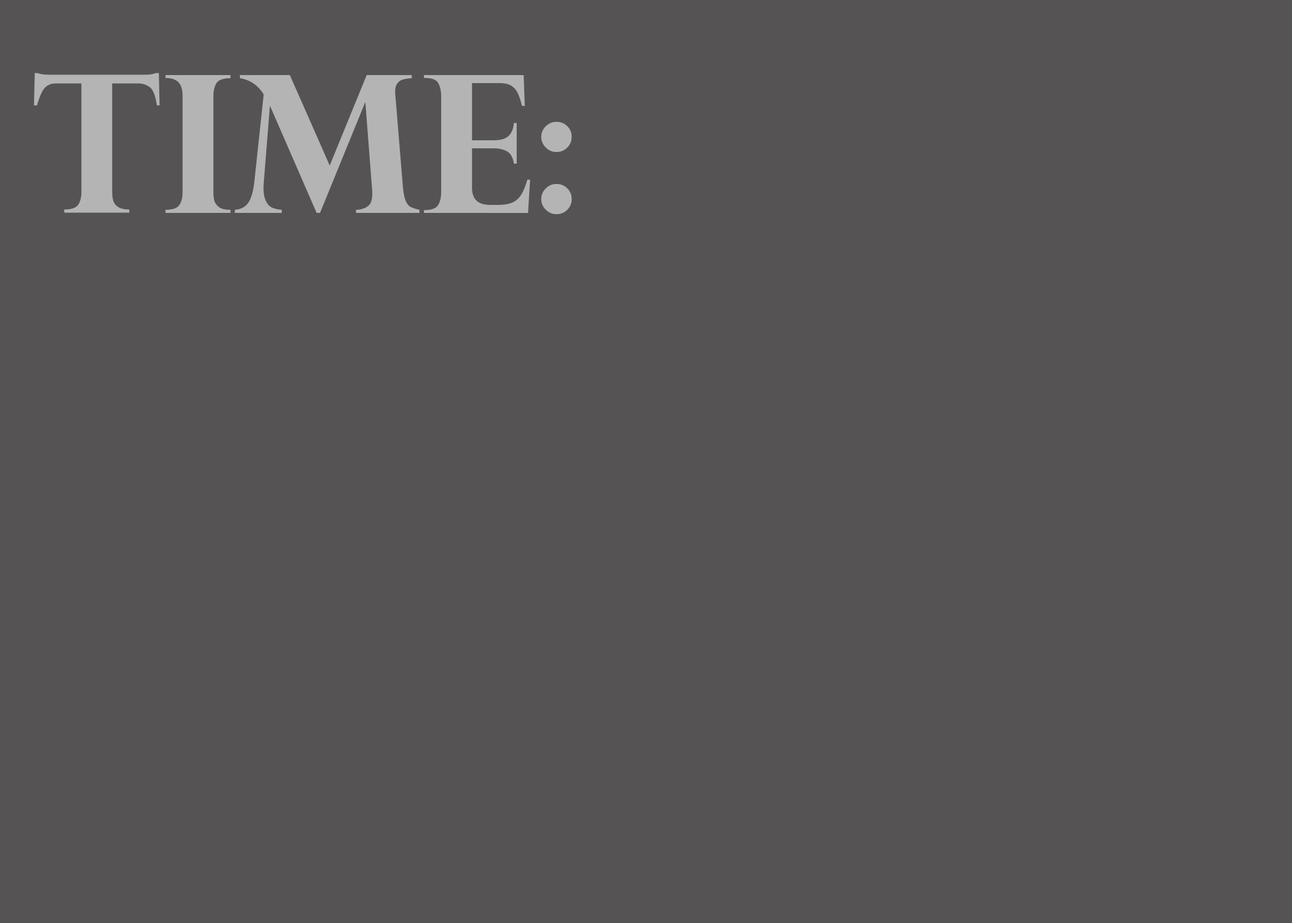
<style>
.page{position:relative;width:1292px;height:923px;background:#555353}
.page>*{position:absolute;margin:0}
.t1{font:192.3px "PerpetuaTitlingMT-Bold";color:#b4b4b4}
</style>
<div class="page">
<p class="t1" style="left:34px;top:73px;width:538px;height:141px">Time:</p>
</div>
